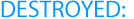
<style>
.page{position:relative;width:134px;height:19px;background:#ffffff}
.page>*{position:absolute;margin:0}
.t1{font:24px "MyriadPro-Regular";color:#0099ff}
</style>
<div class="page">
<p class="t1" style="left:1px;top:0px;width:124px;height:18px">DESTROYED:</p>
</div>
